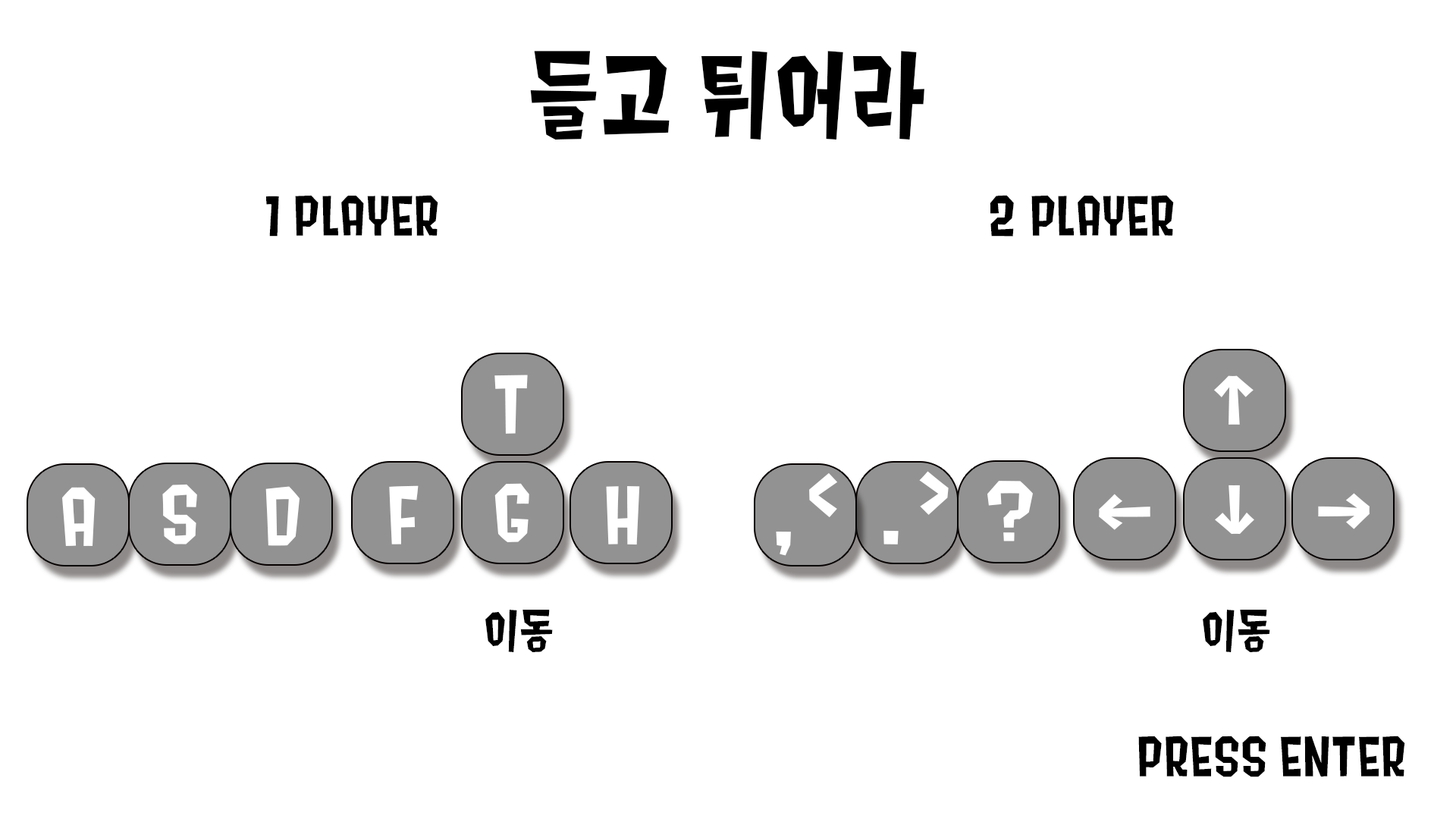
<style>
.page{position:relative;width:1456px;height:819px;background:#ffffff}
.page>*{position:absolute;margin:0}
.t1{font:113.7px "Splat2K";letter-spacing:0.01em;color:#000000}
.t2{font:54.6px "Splat2K";letter-spacing:0.01em;color:#000000}
.t3{font:80.1px "Splat2K";letter-spacing:0.01em;color:#ffffff}
</style>
<div class="page">
<p class="t1" style="left:530px;top:51px;width:394px;height:89px">들고 튀어라</p>
<p class="t2" style="left:266px;top:195px;width:172px;height:42px">1 PLAYER</p>
<p class="t2" style="left:990px;top:195px;width:184px;height:42px">2 PLAYER</p>
<p class="t3" style="left:494px;top:375px;width:34px;height:59px">T</p>
<p class="t3" style="left:1214px;top:375px;width:40px;height:50px">↑</p>
<p class="t3" style="left:809px;top:472px;width:29px;height:45px">&lt;</p>
<p class="t3" style="left:919px;top:471px;width:30px;height:44px">&gt;</p>
<p class="t3" style="left:162px;top:484px;width:35px;height:60px">S</p>
<p class="t3" style="left:389px;top:485px;width:30px;height:59px">F</p>
<p class="t3" style="left:494px;top:483px;width:35px;height:59px">G</p>
<p class="t3" style="left:987px;top:481px;width:46px;height:60px">?</p>
<p class="t3" style="left:1215px;top:485px;width:39px;height:50px">↓</p>
<p class="t3" style="left:62px;top:487px;width:34px;height:59px">A</p>
<p class="t3" style="left:265px;top:486px;width:35px;height:60px">D</p>
<p class="t3" style="left:606px;top:486px;width:34px;height:59px">H</p>
<p class="t3" style="left:1099px;top:494px;width:51px;height:36px">←</p>
<p class="t3" style="left:1318px;top:493px;width:52px;height:36px">→</p>
<p class="t3" style="left:776px;top:532px;width:15px;height:24px">,</p>
<p class="t3" style="left:883px;top:530px;width:16px;height:14px">.</p>
<p class="t2" style="left:485px;top:610px;width:68px;height:42px">이동</p>
<p class="t2" style="left:1203px;top:610px;width:67px;height:42px">이동</p>
<p class="t2" style="left:1138px;top:736px;width:267px;height:41px">PRESS ENTER</p>
</div>
